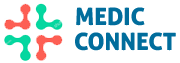
<style>
.page{position:relative;width:180px;height:63px;background:#ffffff}
.page>*{position:absolute;margin:0}
.t1{font:24px "AllerDisplay";color:#016d9c}
</style>
<div class="page">
<p class="t1" style="left:76px;top:7px;width:69px;height:19px">MEDIC</p>
<p class="t1" style="left:75px;top:32px;width:101px;height:19px">CONNECT</p>
</div>
